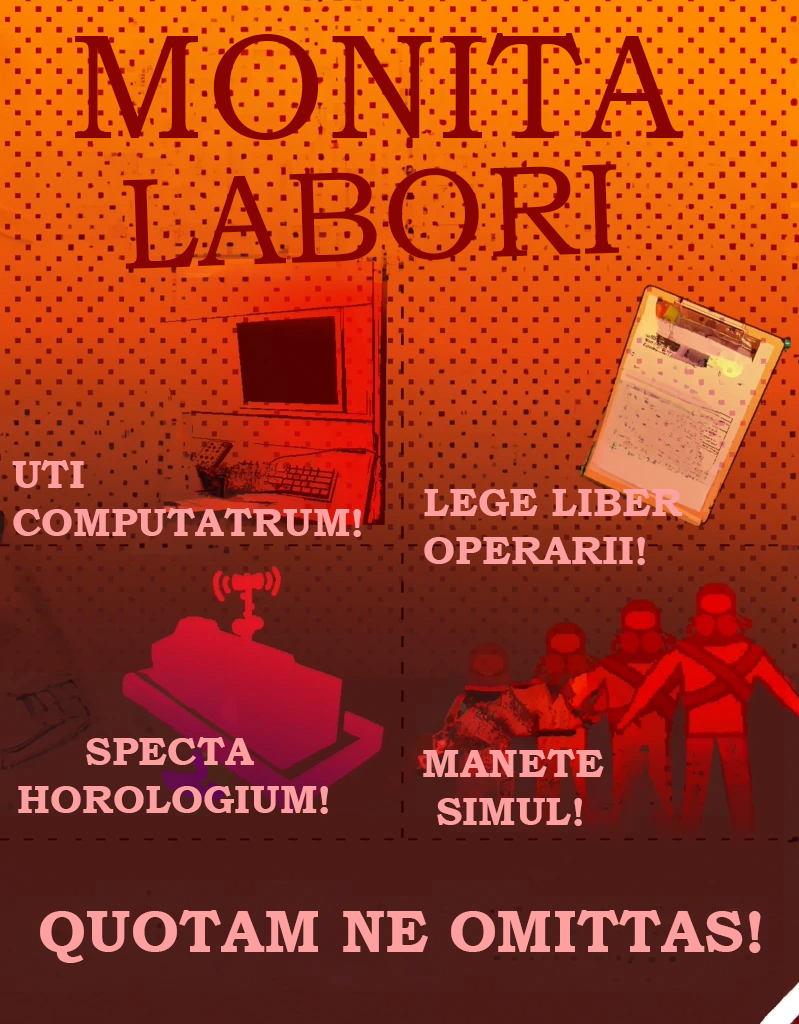
<style>
.page{position:relative;width:799px;height:1024px}
.page>*{position:absolute;margin:0}
.t1{font:150px "BookmanOldStyle";color:#8a0303}
.t2{font:130px "BookmanOldStyle";color:#8a0303}
.t3{font:40px "BookmanOldStyle-Bold";color:#ffa0a0}
.t4{font:40px "BookmanOldStyle-Bold";color:#ffa0a0;text-transform:uppercase}
.t5{font:60px "BookmanOldStyle-Bold";color:#ffa0a0;text-transform:uppercase}
</style>
<div class="page">
<p class="t1" style="left:75px;top:33px;width:608px;height:107px">MONITA</p>
<p class="t2" style="left:123px;top:164px;width:497px;height:105px;rotate:-2deg">LABORI</p>
<p class="t3" style="left:12px;top:460px;width:349px;height:77px">UTI <br>COMPUTATRUM!</p>
<p class="t4" style="left:424px;top:489px;width:259px;height:76px">LEGE LIber<br>OperAriI!</p>
<p class="t4" style="left:18px;top:737px;width:310px;height:77px">Specta<br>horologium!</p>
<p class="t4" style="left:423px;top:749px;width:181px;height:77px">Manete<br> simul!</p>
<p class="t5" style="left:40px;top:910px;width:721px;height:53px">Quotam ne omittas!</p>
</div>
